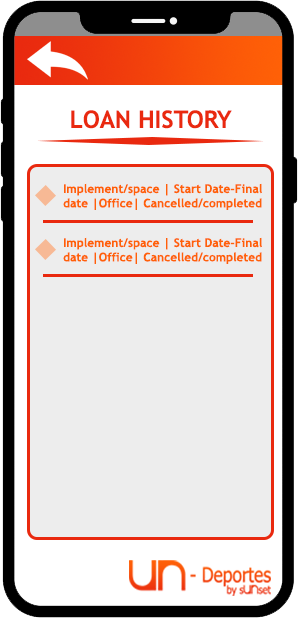
<style>
.page{position:relative;width:298px;height:618px;background:#ededed}
.page>*{position:absolute;margin:0}
.t1{font:24px "TrebuchetMS-Bold";color:#e9290f}
.t2{font:12px "TrebuchetMS-Bold";color:#ff6107}
</style>
<div class="page">
<p class="t1" style="left:71px;top:110px;width:161px;height:19px">LOAN HISTORY</p>
<p class="t2" style="left:63px;top:183px;width:199px;height:27px">Implement/space | Start Date-Final date |Office| Cancelled/completed</p>
<p class="t2" style="left:63px;top:237px;width:199px;height:27px">Implement/space | Start Date-Final date |Office| Cancelled/completed</p>
</div>
